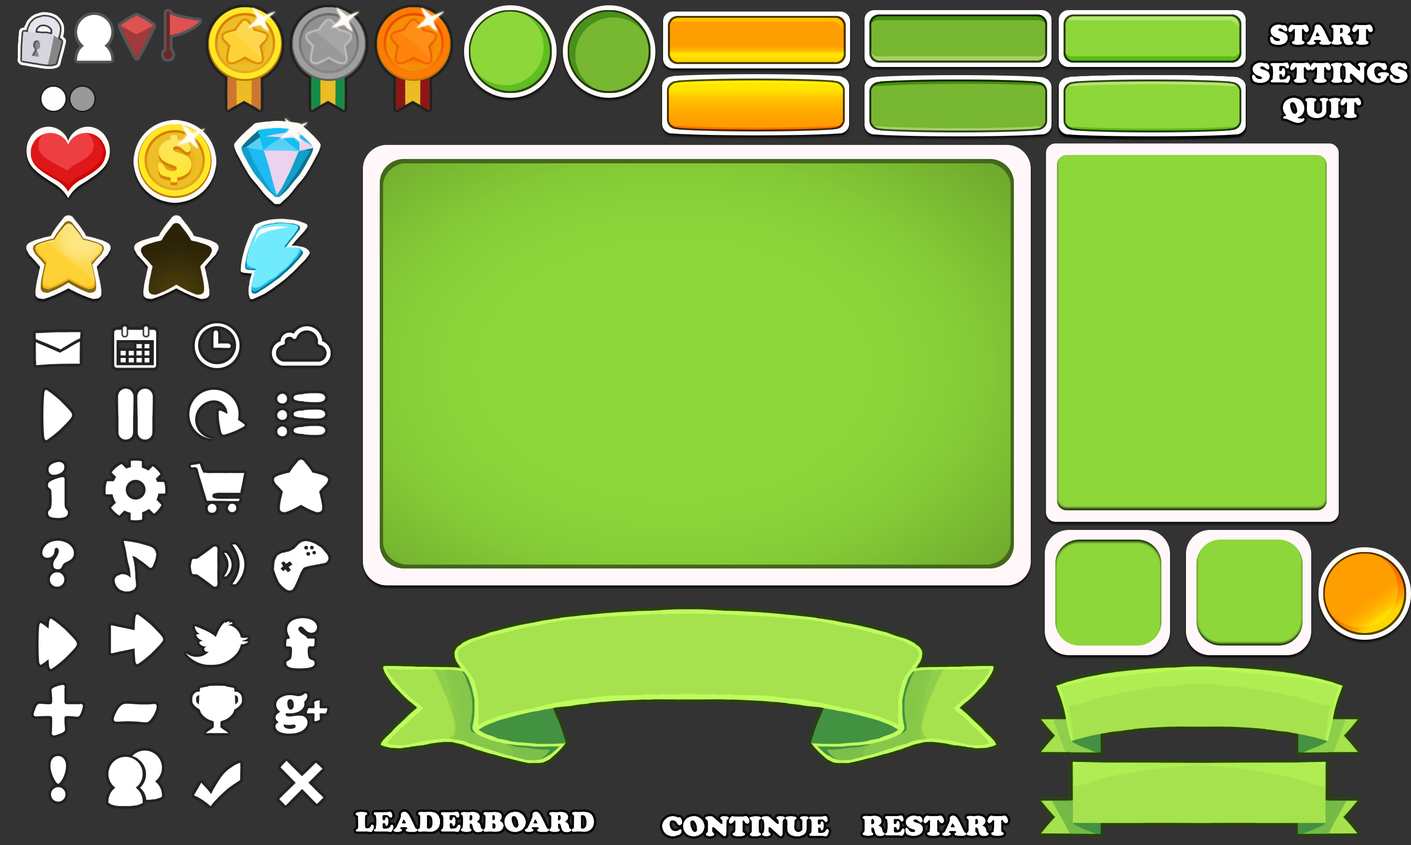
<style>
.page{position:relative;width:1411px;height:845px;background:#333333}
.page>*{position:absolute;margin:0}
.t1{font:28.9px "CooperBlack";color:#ffffff}
.t2{font:82.6px "CooperBlack";color:#ffffff;scale:0.71 1}
.t3{font:67.5px "CooperBlack";color:#ffffff}
.t4{font:73.4px "CooperBlack";letter-spacing:0.025em;color:#ffffff}
.t5{font:102.2px "CooperBlack";letter-spacing:0.025em;color:#ffffff}
.t6{font:102.2px "CooperBlack";letter-spacing:0.025em;color:#ffffff;scale:1.47 1}
</style>
<div class="page">
<p class="t1" style="left:1270px;top:25px;width:103px;height:20px">START</p>
<p class="t1" style="left:1270px;top:25px;width:103px;height:20px">START</p>
<p class="t1" style="left:1270px;top:25px;width:103px;height:20px">START</p>
<p class="t1" style="left:1252px;top:62px;width:155px;height:21px">SETTINGS</p>
<p class="t1" style="left:1252px;top:62px;width:155px;height:21px">SETTINGS</p>
<p class="t1" style="left:1252px;top:62px;width:155px;height:21px">SETTINGS</p>
<p class="t1" style="left:1283px;top:98px;width:78px;height:25px">QUIT</p>
<p class="t1" style="left:1283px;top:98px;width:78px;height:25px">QUIT</p>
<p class="t1" style="left:1283px;top:98px;width:78px;height:25px">QUIT</p>
<p class="t2" style="left:48px;top:462px;width:20px;height:56px">i</p>
<p class="t3" style="left:42px;top:541px;width:32px;height:46px">?</p>
<p class="t4" style="left:286px;top:618px;width:31px;height:51px">f</p>
<p class="t5" style="left:33px;top:685px;width:50px;height:51px">+</p>
<p class="t6" style="left:114px;top:704px;width:43px;height:19px">-</p>
<p class="t3" style="left:50px;top:756px;width:16px;height:46px">!</p>
<p class="t1" style="left:355px;top:811px;width:239px;height:22px">LEADERBOARD</p>
<p class="t1" style="left:355px;top:811px;width:239px;height:22px">LEADERBOARD</p>
<p class="t1" style="left:355px;top:811px;width:239px;height:22px">LEADERBOARD</p>
<p class="t1" style="left:662px;top:816px;width:167px;height:21px">CONTINUE</p>
<p class="t1" style="left:662px;top:816px;width:167px;height:21px">CONTINUE</p>
<p class="t1" style="left:662px;top:816px;width:167px;height:21px">CONTINUE</p>
<p class="t1" style="left:863px;top:815px;width:145px;height:22px">RESTART</p>
<p class="t1" style="left:863px;top:815px;width:145px;height:22px">RESTART</p>
<p class="t1" style="left:863px;top:815px;width:145px;height:22px">RESTART</p>
</div>
